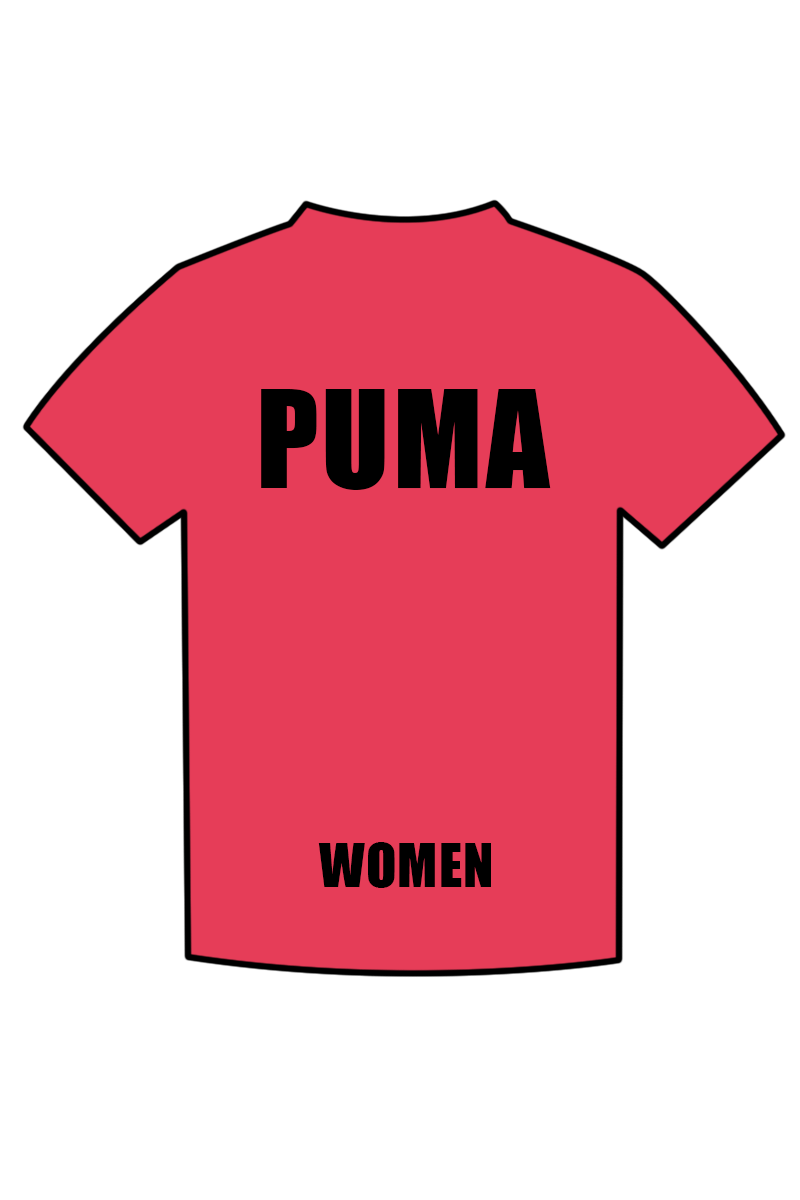
<style>
.page{position:relative;width:800px;height:1200px;background:#ffffff}
.page>*{position:absolute;margin:0}
.t1{font:125px "Impact";letter-spacing:0.025em;color:#000000}
.t2{font:55.6px "Impact";letter-spacing:0.025em;color:#000000}
</style>
<div class="page">
<p class="t1" style="left:261px;top:389px;width:290px;height:101px">PUMA</p>
<p class="t2" style="left:318px;top:842px;width:173px;height:46px">WOMEN</p>
</div>
